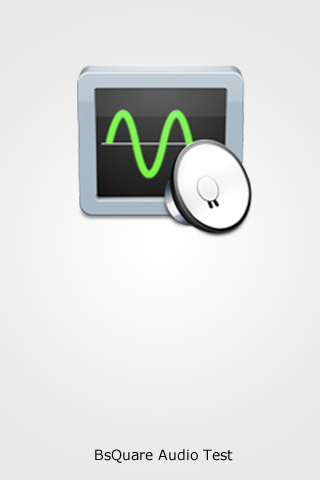
<style>
.page{position:relative;width:320px;height:480px}
.page>*{position:absolute;margin:0}
.t1{font:14px "Verdana";color:#000000}
</style>
<div class="page">
<p class="t1" style="left:95px;top:449px;width:138px;height:14px">BsQuare Audio Test</p>
</div>
